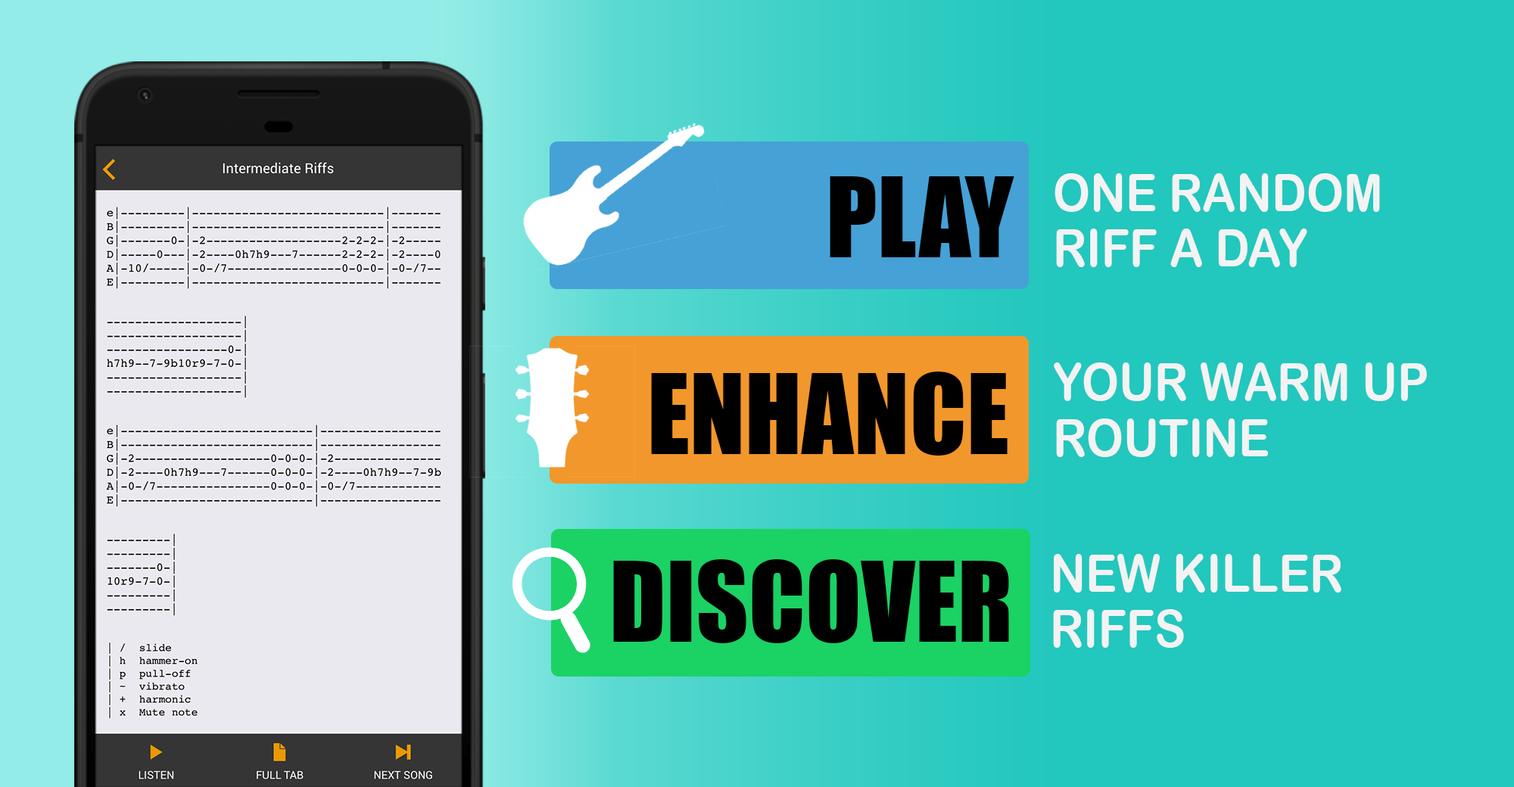
<style>
.page{position:relative;width:1514px;height:787px;background:#22c7bd}
.page>*{position:absolute;margin:0}
.t1{font:52.1px "ArialRoundedMTBold";color:#f3f3f3;scale:0.9 1}
.t2{font:102.6px "Impact";color:#000000}
</style>
<div class="page">
<p class="t1" style="left:1055px;top:173px;width:325px;height:39px">ONE RANDOM</p>
<p class="t2" style="left:830px;top:176px;width:185px;height:81px">PLAY</p>
<p class="t1" style="left:1056px;top:229px;width:252px;height:38px">RIFF A DAY</p>
<p class="t1" style="left:1054px;top:363px;width:373px;height:38px">YOUR WARM UP</p>
<p class="t2" style="left:651px;top:372px;width:357px;height:84px">ENHANCE</p>
<p class="t1" style="left:1056px;top:419px;width:212px;height:38px">ROUTINE</p>
<p class="t1" style="left:1054px;top:554px;width:288px;height:39px">NEW KILLER</p>
<p class="t2" style="left:613px;top:560px;width:396px;height:84px">DISCOVER</p>
<p class="t1" style="left:1053px;top:610px;width:131px;height:38px">RIFFS</p>
</div>
